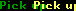
<style>
.page{position:relative;width:76px;height:11px;background:#000000}
.page>*{position:absolute;margin:0}
.t1{font:13.2px "Onesize";color:#009900;scale:0.91 1}
</style>
<div class="page">
<p class="t1" style="left:0px;top:1px;width:46px;height:10px">Pick up</p>
</div>
